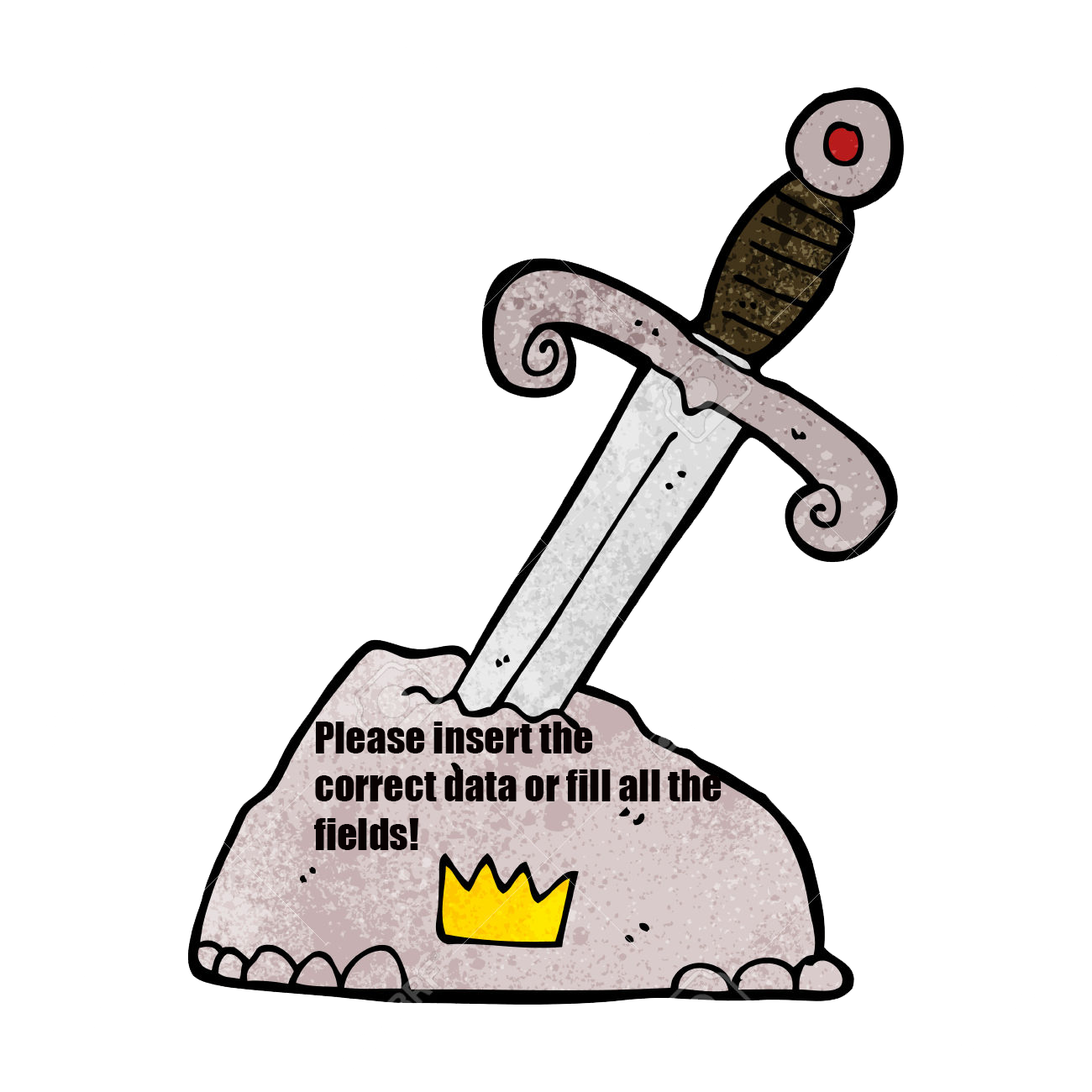
<style>
.page{position:relative;width:1092px;height:1092px;background:#ffffff}
.page>*{position:absolute;margin:0}
.t1{font:40.3px "Impact";color:#090202}
</style>
<div class="page">
<p class="t1" style="left:314px;top:722px;width:408px;height:128px">Please insert the <br>correct data or fill all the <br>fields!</p>
</div>
